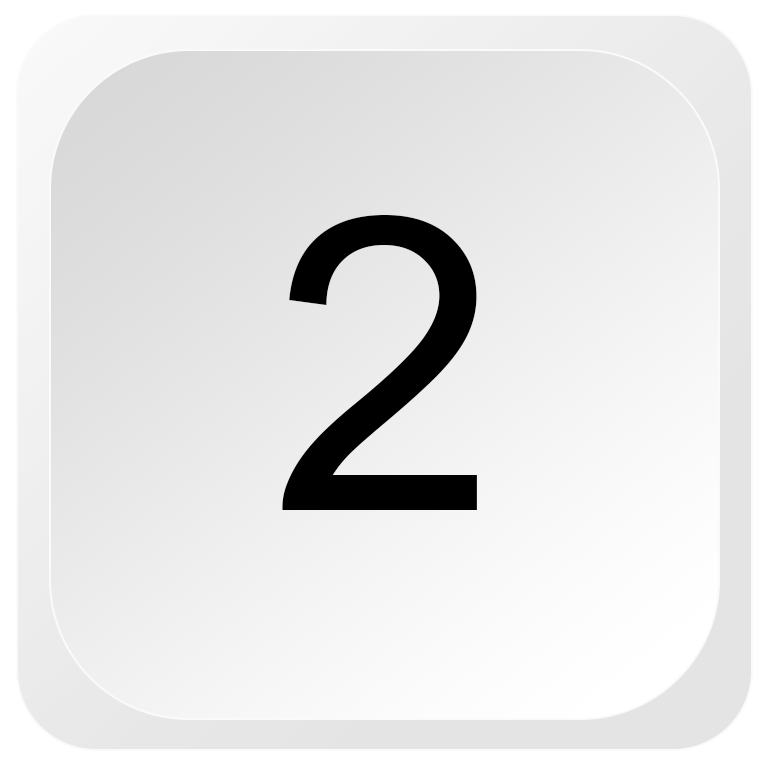
<style>
.page{position:relative;width:768px;height:768px}
.page>*{position:absolute;margin:0}
.t1{font:411px "ArialMT";color:#000000}
</style>
<div class="page">
<p class="t1" style="left:282px;top:215px;width:195px;height:295px">2</p>
</div>
